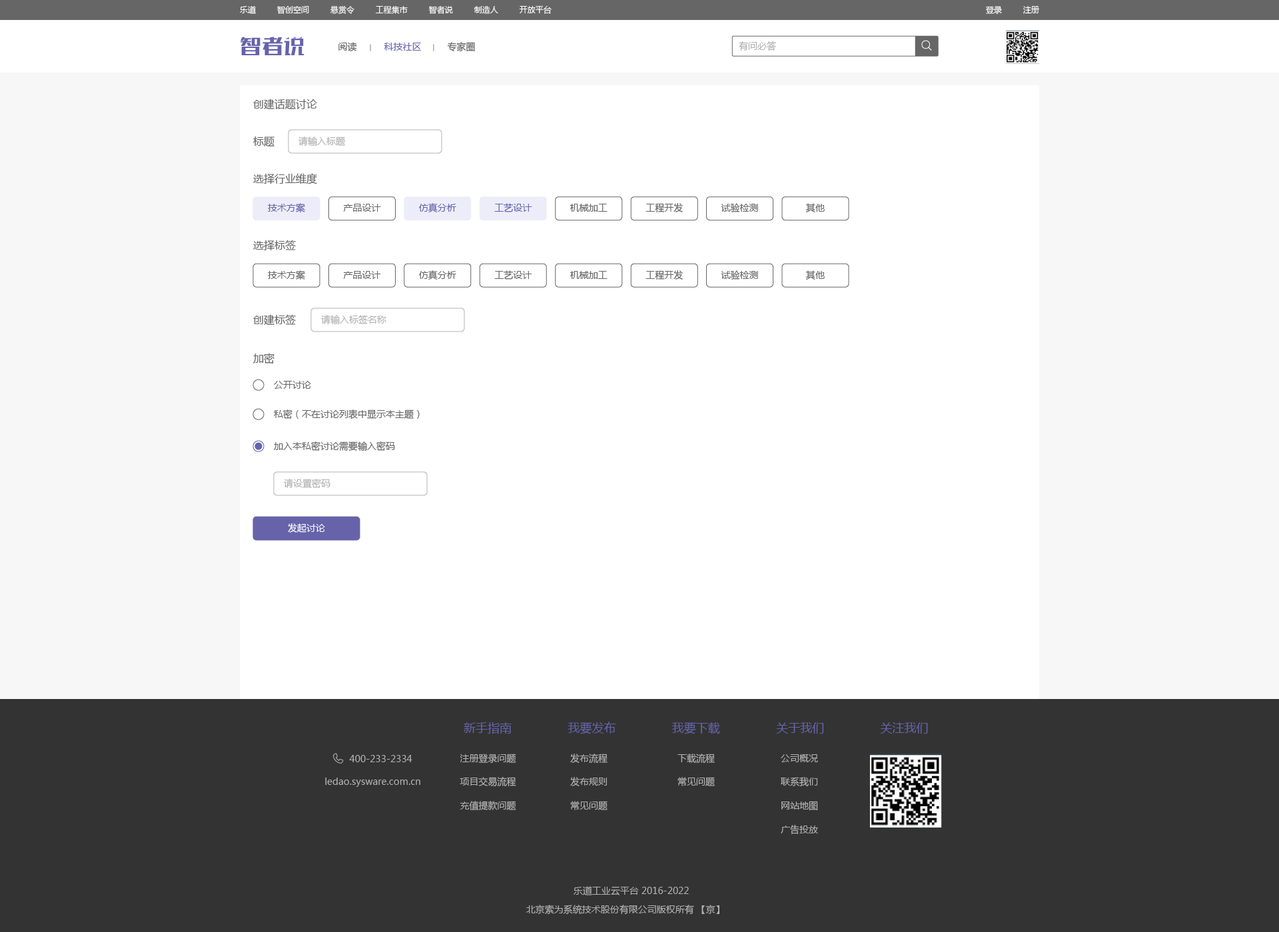
<style>
.page{position:relative;width:1279px;height:932px;background:#ffffff}
.page>*{position:absolute;margin:0}
.t1{font:8px "MicrosoftYaHei";color:#ffffff}
.t2{font:20px "FZSKJW--GB1-0";color:#6663ab;scale:1.08 1}
.t3{font:9.3px "MicrosoftYaHei";color:#666666}
.t4{font:9.3px "MicrosoftYaHei";color:#b2b2b2}
.t5{font:9.3px "MicrosoftYaHei";color:#6663ab}
.t6{font:10.7px "MicrosoftYaHei";color:#666666}
.t7{font:9.3px "MicrosoftYaHei";color:#ffffff}
.t8{font:12px "MicrosoftYaHei";color:#6663ab}
</style>
<div class="page">
<p class="t1" style="left:240px;top:5px;width:311px;height:9px">乐道         智创空间         悬赏令         工程集市         智者说         制造人         开放平台</p>
<p class="t1" style="left:986px;top:6px;width:53px;height:8px">登录         注册</p>
<p class="t2" style="left:240px;top:37px;width:64px;height:18px">智者说</p>
<p class="t3" style="left:338px;top:42px;width:19px;height:10px">阅读</p>
<p class="t3" style="left:447px;top:42px;width:28px;height:10px">专家圈</p>
<p class="t4" style="left:739px;top:41px;width:37px;height:10px">有问必答</p>
<p class="t5" style="left:384px;top:43px;width:37px;height:8px">科技社区</p>
<p class="t6" style="left:253px;top:99px;width:64px;height:11px">创建话题讨论</p>
<p class="t6" style="left:253px;top:137px;width:21px;height:10px">标题</p>
<p class="t4" style="left:298px;top:137px;width:47px;height:10px">请输入标题</p>
<p class="t6" style="left:253px;top:173px;width:64px;height:11px">选择行业维度</p>
<p class="t5" style="left:268px;top:203px;width:37px;height:10px">技术方案</p>
<p class="t3" style="left:343px;top:204px;width:38px;height:8px">产品设计</p>
<p class="t5" style="left:419px;top:203px;width:37px;height:9px">仿真分析</p>
<p class="t5" style="left:494px;top:203px;width:38px;height:9px">工艺设计</p>
<p class="t3" style="left:569px;top:204px;width:38px;height:8px">机械加工</p>
<p class="t3" style="left:645px;top:203px;width:38px;height:10px">工程开发</p>
<p class="t3" style="left:721px;top:203px;width:37px;height:9px">试验检测</p>
<p class="t3" style="left:805px;top:203px;width:20px;height:10px">其他</p>
<p class="t6" style="left:253px;top:240px;width:43px;height:11px">选择标签</p>
<p class="t3" style="left:268px;top:270px;width:37px;height:10px">技术方案</p>
<p class="t3" style="left:343px;top:271px;width:38px;height:8px">产品设计</p>
<p class="t3" style="left:419px;top:270px;width:37px;height:10px">仿真分析</p>
<p class="t3" style="left:494px;top:270px;width:38px;height:10px">工艺设计</p>
<p class="t3" style="left:569px;top:271px;width:38px;height:8px">机械加工</p>
<p class="t3" style="left:645px;top:270px;width:38px;height:10px">工程开发</p>
<p class="t3" style="left:721px;top:270px;width:37px;height:10px">试验检测</p>
<p class="t3" style="left:805px;top:270px;width:20px;height:10px">其他</p>
<p class="t6" style="left:253px;top:314px;width:43px;height:12px">创建标签</p>
<p class="t4" style="left:321px;top:315px;width:65px;height:10px">请输入标签名称</p>
<p class="t6" style="left:253px;top:353px;width:21px;height:11px">加密</p>
<p class="t3" style="left:274px;top:381px;width:37px;height:8px">公开讨论</p>
<p class="t3" style="left:274px;top:410px;width:146px;height:10px">私密（不在讨论列表中显示本主题）</p>
<p class="t3" style="left:274px;top:442px;width:121px;height:10px">加入本私密讨论需要输入密码</p>
<p class="t4" style="left:284px;top:479px;width:46px;height:9px">请设置密码</p>
<p class="t7" style="left:288px;top:524px;width:37px;height:9px">发起讨论</p>
<p class="t8" style="left:464px;top:723px;width:48px;height:11px">新手指南</p>
<p class="t8" style="left:567px;top:722px;width:49px;height:13px">我要发布</p>
<p class="t8" style="left:671px;top:723px;width:49px;height:12px">我要下载</p>
<p class="t8" style="left:776px;top:723px;width:48px;height:11px">关于我们</p>
<p class="t8" style="left:880px;top:723px;width:48px;height:11px">关注我们</p>
<p class="t4" style="left:349px;top:755px;width:63px;height:8px">400-233-2334</p>
<p class="t4" style="left:460px;top:754px;width:56px;height:9px">注册登录问题</p>
<p class="t4" style="left:570px;top:754px;width:37px;height:10px">发布流程</p>
<p class="t4" style="left:677px;top:754px;width:38px;height:10px">下载流程</p>
<p class="t4" style="left:781px;top:755px;width:37px;height:8px">公司概况</p>
<p class="t4" style="left:325px;top:778px;width:95px;height:9px">ledao.sysware.com.cn</p>
<p class="t4" style="left:460px;top:777px;width:56px;height:10px">项目交易流程</p>
<p class="t4" style="left:570px;top:777px;width:37px;height:10px">发布规则</p>
<p class="t4" style="left:677px;top:777px;width:38px;height:10px">常见问题</p>
<p class="t4" style="left:781px;top:777px;width:37px;height:10px">联系我们</p>
<p class="t4" style="left:460px;top:801px;width:56px;height:10px">充值提款问题</p>
<p class="t4" style="left:570px;top:801px;width:37px;height:10px">常见问题</p>
<p class="t4" style="left:781px;top:801px;width:37px;height:10px">网站地图</p>
<p class="t4" style="left:781px;top:825px;width:37px;height:10px">广告投放</p>
<p class="t4" style="left:573px;top:887px;width:116px;height:9px">乐道工业云平台 2016-2022</p>
<p class="t4" style="left:526px;top:905px;width:193px;height:10px">北京索为系统技术股份有限公司版权所有 【京】</p>
</div>
